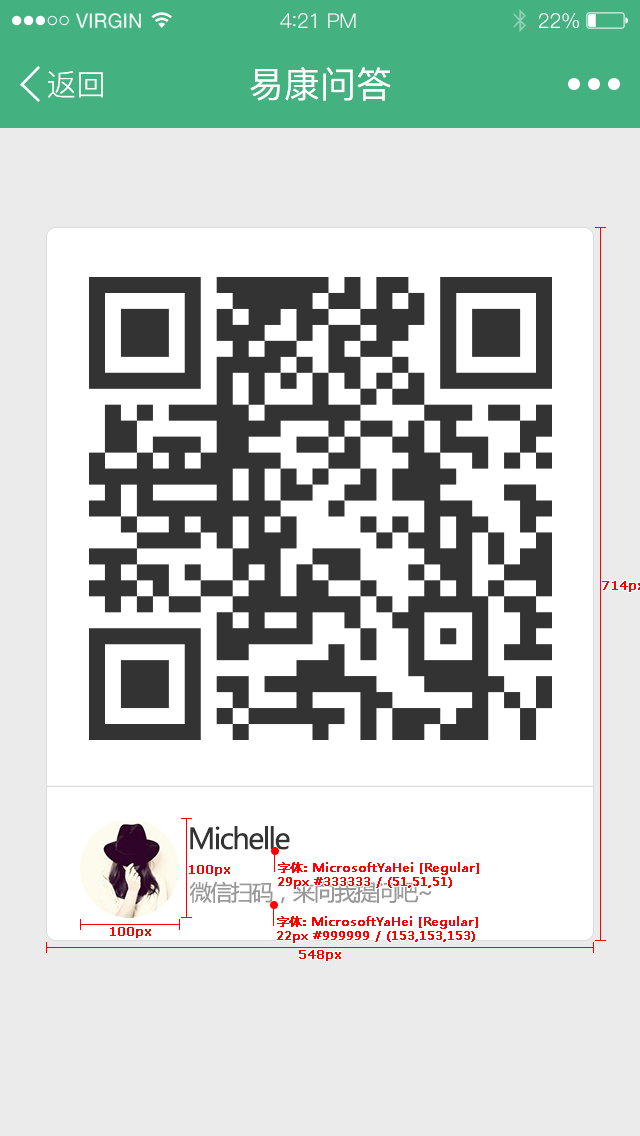
<style>
.page{position:relative;width:640px;height:1136px;background:#ebebeb}
.page>*{position:absolute;margin:0}
.t1{font:19.6px "HelveticaNeue";letter-spacing:0.02em;color:#ffffff}
.t2{font:20.4px "PingFang-SC-Regular";letter-spacing:-0.02em;color:#ffffff}
.t3{font:22.1px "PingFang-SC-Regular";letter-spacing:-0.02em;color:#ffffff}
.t4{font:30px "PingFang-SC-Regular";color:#ffffff}
.t5{font:36px "PingFang-SC-Medium";color:#ffffff}
.t6{font:28.6px "MicrosoftYaHei";letter-spacing:-0.06em;color:#333333}
.t7{font:12px "Verdana";color:#ff0000;font-weight:bold}
.t8{font:12px "MicrosoftYaHei";color:#ff0000;font-weight:bold}
.t9{font:22px "MicrosoftYaHei";letter-spacing:-0.06em;color:#999999}
</style>
<div class="page">
<p class="t1" style="left:76px;top:13px;width:65px;height:16px">VIRGIN</p>
<p class="t2" style="left:280px;top:13px;width:76px;height:15px">4<span class="t3">:</span>21 PM</p>
<p class="t2" style="left:539px;top:13px;width:40px;height:16px">22%</p>
<p class="t4" style="left:48px;top:71px;width:55px;height:27px">返回</p>
<p class="t5" style="left:250px;top:67px;width:141px;height:34px">易康问答</p>
<p class="t6" style="left:190px;top:826px;width:100px;height:24px">Michelle</p>
<p class="t7" style="left:189px;top:865px;width:41px;height:11px">100px</p>
<p class="t8" style="left:278px;top:862px;width:201px;height:27px">字体: MicrosoftYaHei [Regular]<br>29px #333333 / (51,51,51)</p>
<p class="t9" style="left:189px;top:881px;width:243px;height:23px">微信扫码，来向我提问吧~</p>
<p class="t8" style="left:277px;top:916px;width:201px;height:27px">字体: MicrosoftYaHei [Regular]<br>22px #999999 / (153,153,153)</p>
<p class="t7" style="left:110px;top:927px;width:41px;height:11px">100px</p>
<p class="t7" style="left:299px;top:950px;width:42px;height:11px">548px</p>
</div>
